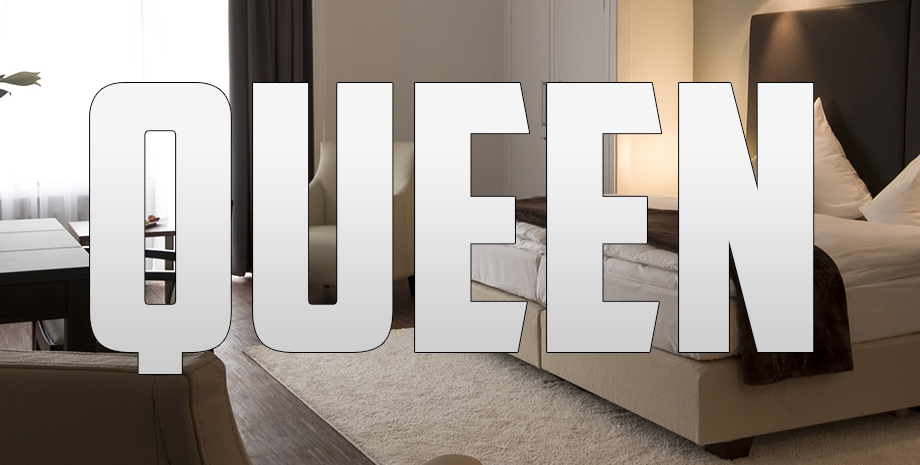
<style>
.page{position:relative;width:920px;height:465px}
.page>*{position:absolute;margin:0}
.t1{font:371px "AmericanCaptain";color:#f5f5f5}
</style>
<div class="page">
<p class="t1" style="left:90px;top:83px;width:724px;height:291px">QUEEN</p>
</div>
